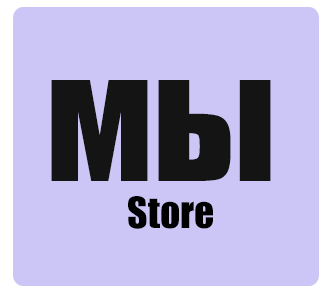
<style>
.page{position:relative;width:332px;height:292px;background:#cbc6f6}
.page>*{position:absolute;margin:0}
.t1{font:155.8px "Impact";color:#141414}
.t2{font:39.8px "Impact";color:#000000}
</style>
<div class="page">
<p class="t1" style="left:51px;top:80px;width:220px;height:101px">мы</p>
<p class="t2" style="left:128px;top:196px;width:85px;height:33px">Store</p>
</div>
